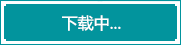
<style>
.page{position:relative;width:181px;height:46px;background:#02949d}
.page>*{position:absolute;margin:0}
.t1{font:16px "MicrosoftYaHeiUI";color:#ffffff}
</style>
<div class="page">
<p class="t1" style="left:62px;top:15px;width:59px;height:16px">下载中...</p>
</div>
